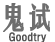
<style>
.page{position:relative;width:55px;height:42px;background:#ffffff}
.page>*{position:absolute;margin:0}
.t1{font:29px "FZYTK--GBK1-0";color:#6e6e6e;font-weight:bold}
.t2{font:11px "FZYTK--GBK1-0";color:#525252;font-weight:bold}
</style>
<div class="page">
<p class="t1" style="left:3px;top:3px;width:47px;height:29px">鬼试</p>
<p class="t2" style="left:9px;top:32px;width:38px;height:11px">Goodtry</p>
</div>
